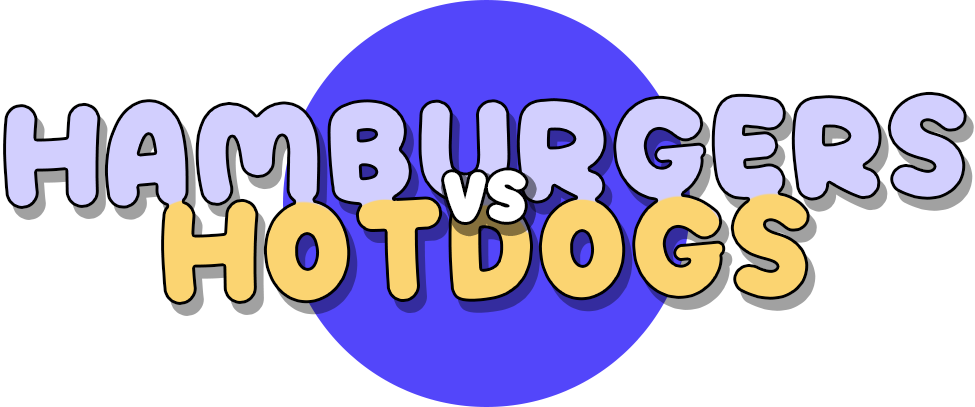
<style>
.page{position:relative;width:975px;height:407px;background:#ffffff}
.page>*{position:absolute;margin:0}
.t1{font:130px/98px "Besty";letter-spacing:0.01em}
.t2{font:62px "Besty";letter-spacing:0.01em;color:#ffffff}
</style>
<div class="page">
<p class="t1" style="left:3px;top:91px;width:964px;height:214px;text-align:center;rotate:-1deg">HamburgeRS<br>Hotdogs</p>
<p class="t2" style="left:444px;top:170px;width:82px;height:52px;rotate:-1deg">VS</p>
</div>
